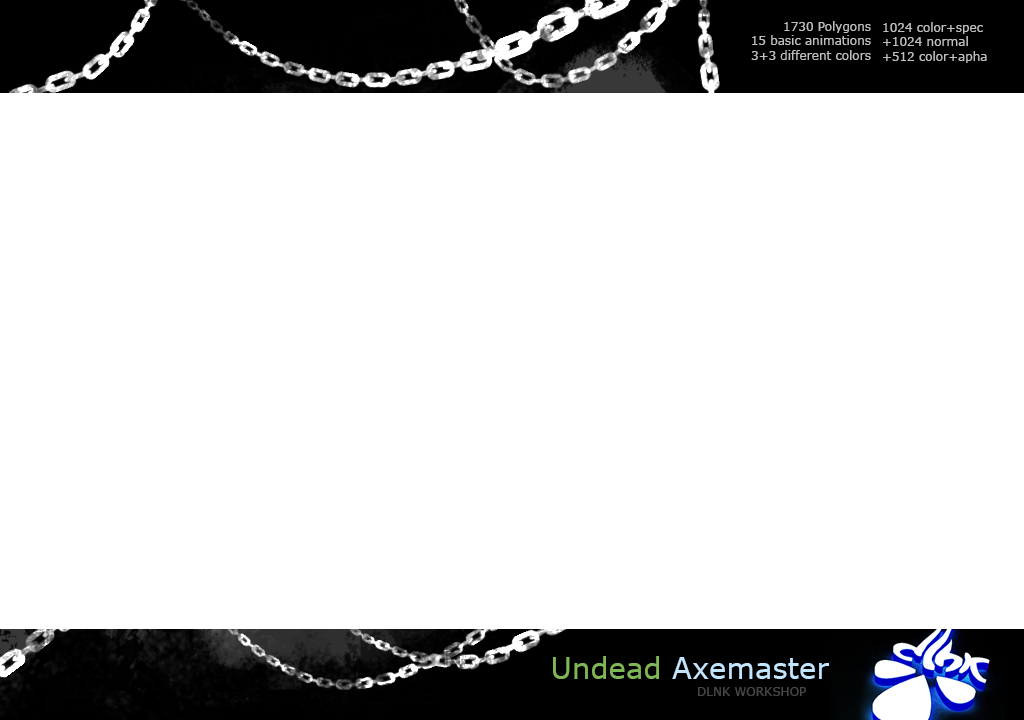
<style>
.page{position:relative;width:1024px;height:720px;background:#ffffff}
.page>*{position:absolute;margin:0}
.t1{font:12px "Verdana";color:#bfbfbf}
.t2{font:29.2px "Verdana";color:#c1e4ff}
.t3{font:29.2px "Verdana";color:#7fb756}
.t4{font:12px "Verdana";color:#464646}
</style>
<div class="page">
<p class="t1" style="left:751px;top:21px;width:120px;height:39px;text-align:right">1730 Polygons<br>15 basic animations<br>3+3 different colors</p>
<p class="t1" style="left:883px;top:22px;width:104px;height:41px">1024 color+spec<br>+1024 normal<br>+512 color+apha</p>
<p class="t2" style="left:553px;top:656px;width:276px;height:23px"><span class="t3">Undead </span>Axemaster</p>
<p class="t4" style="left:698px;top:687px;width:108px;height:9px">DLNK WORKSHOP</p>
</div>
